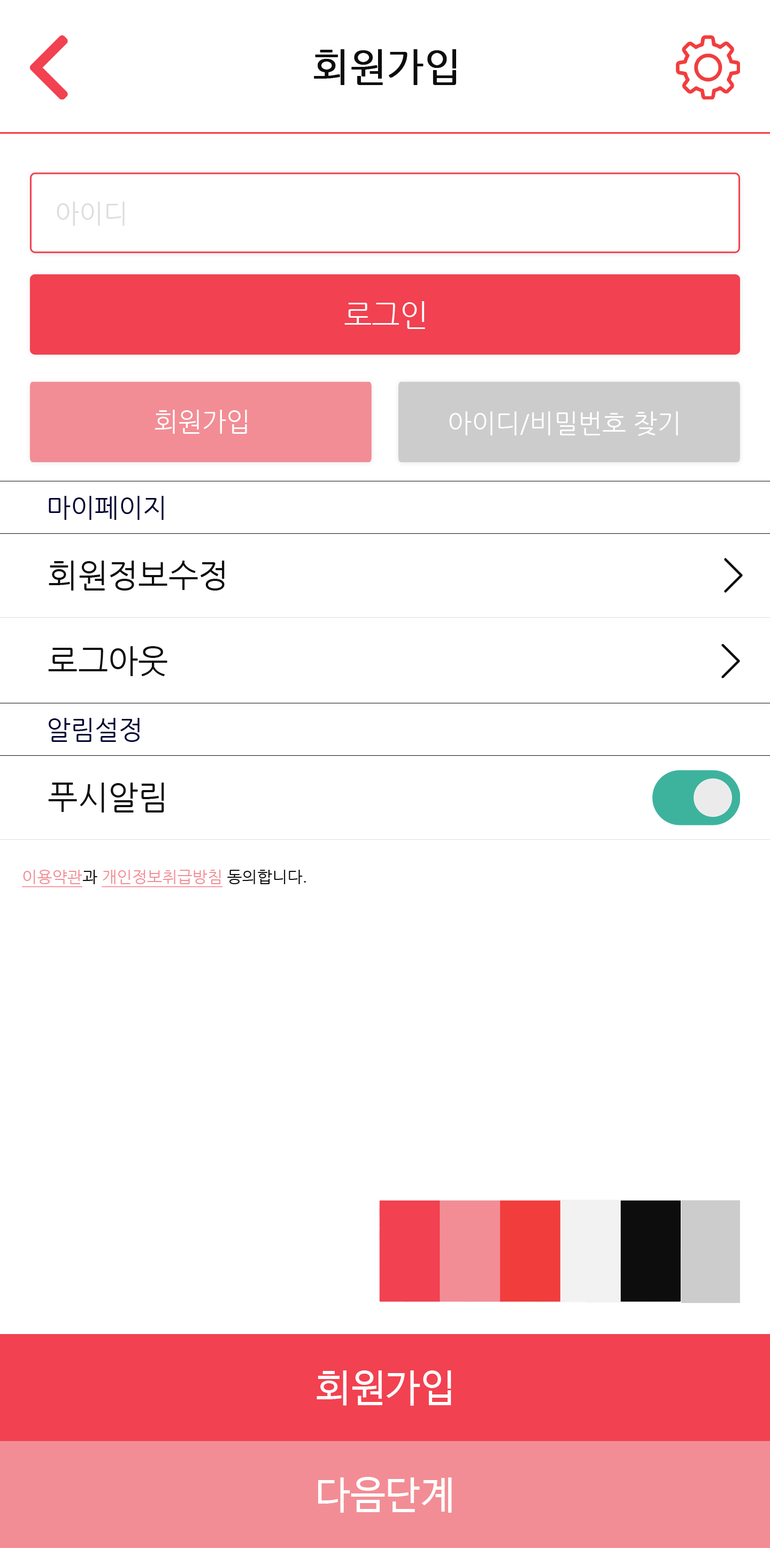
<style>
.page{position:relative;width:770px;height:1548px;background:#ffffff}
.page>*{position:absolute;margin:0}
.t1{font:38.5px "NanumGothic";color:#0d0d0d;font-weight:bold}
.t2{font:25.7px "NanumGothic";color:#dddddd}
.t3{font:30px "NanumGothic";color:#ffffff}
.t4{font:25.7px "NanumGothic";color:#ffffff}
.t5{font:25.7px "NanumGothic";color:#000333}
.t6{font:32.1px/85.6px "NanumGothic";color:#0d0d0d}
.t7{font:32.1px "NanumGothic";color:#0d0d0d}
.t8{font:16px "NanumGothic";color:#f28d95;text-decoration:underline}
.t9{font:16px "NanumGothic";color:#0d0d0d}
.t10{font:38.5px "NanumBarunGothic";letter-spacing:0.02em;color:#ffffff}
</style>
<div class="page">
<p class="t1" style="left:314px;top:49px;width:142px;height:36px">회원가입</p>
<p class="t2" style="left:57px;top:202px;width:68px;height:24px">아이디</p>
<p class="t3" style="left:344px;top:301px;width:81px;height:28px">로그인</p>
<p class="t4" style="left:155px;top:410px;width:92px;height:24px">회원가입</p>
<p class="t4" style="left:449px;top:411px;width:229px;height:25px">아이디/비밀번호 찾기</p>
<p class="t5" style="left:49px;top:496px;width:115px;height:24px">마이페이지</p>
<p class="t6" style="left:48px;top:561px;width:177px;height:115px">회원정보수정<br>로그아웃</p>
<p class="t5" style="left:49px;top:718px;width:91px;height:24px">알림설정</p>
<p class="t7" style="left:48px;top:783px;width:116px;height:30px">푸시알림</p>
<p class="t8" style="left:22px;top:870px;width:284px;height:17px">이용약관<span class="t9">과 </span>개인정보취급방침<span class="t9"> 동의합니다.</span></p>
<p class="t10" style="left:317px;top:1370px;width:134px;height:36px">회원가입</p>
<p class="t10" style="left:318px;top:1477px;width:134px;height:36px">다음단계</p>
</div>
